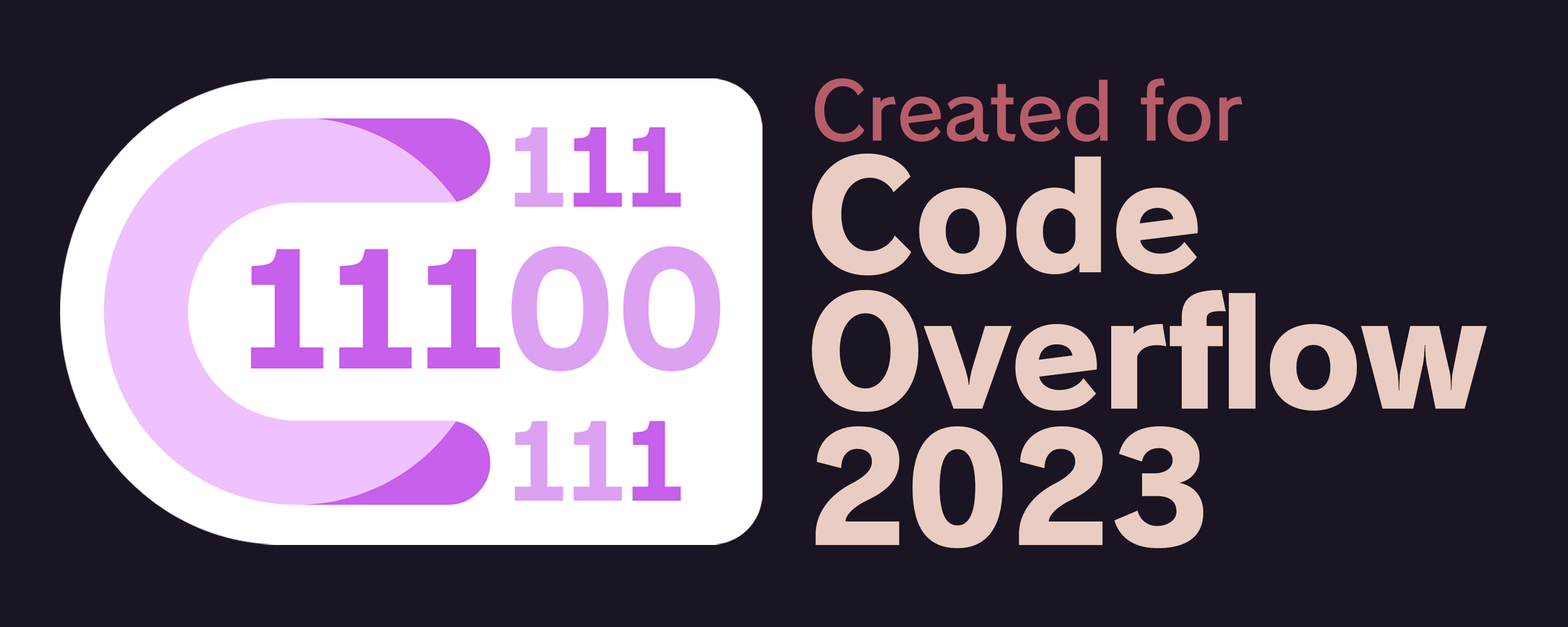
<style>
.page{position:relative;width:1568px;height:627px;background:#1a1423}
.page>*{position:absolute;margin:0}
.t1{font:77.8px "RodinPro-DB";letter-spacing:-0.004em;color:#b75d69}
.t2{font:148.3px/136.5px "RodinPro-EB";letter-spacing:-0.004em;color:#eacdc2}
</style>
<div class="page">
<p class="t1" style="left:814px;top:78px;width:428px;height:64px">Created for</p>
<p class="t2" style="left:812px;top:153px;width:675px;height:395px">Code<br>Overflow<br>2023</p>
</div>
